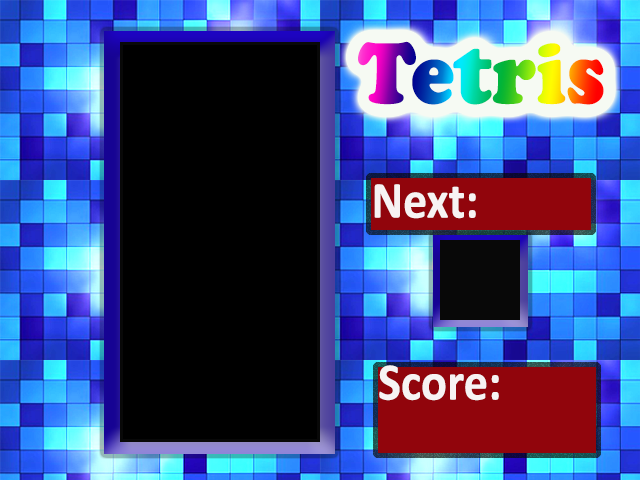
<style>
.page{position:relative;width:640px;height:480px;background:#000000}
.page>*{position:absolute;margin:0}
.t1{font:89.7px "CooperBlack";scale:0.92 1}
.t2{font:52.3px "Calibri-Bold";color:#f7f3f3;scale:0.92 1}
.t3{font:52.9px "Calibri-Bold";color:#f7f3f3;scale:0.92 1}
</style>
<div class="page">
<p class="t1" style="left:358px;top:41px;width:246px;height:64px">Tetris</p>
<p class="t2" style="left:374px;top:184px;width:102px;height:35px">Next:</p>
<p class="t3" style="left:379px;top:365px;width:120px;height:36px">Score:</p>
</div>
